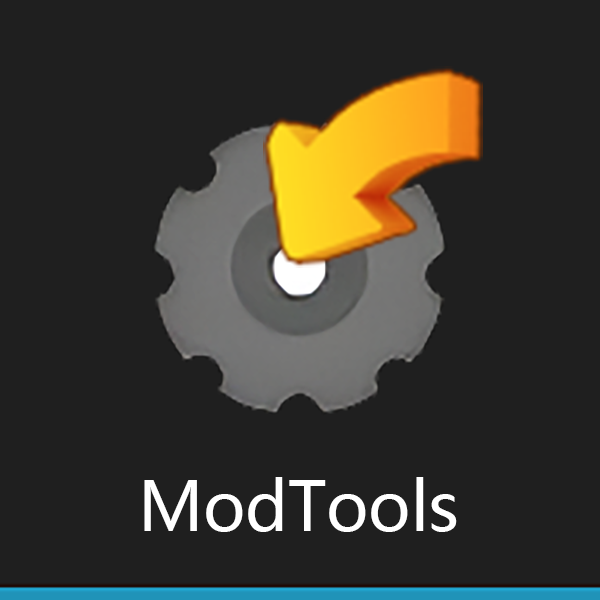
<style>
.page{position:relative;width:600px;height:600px;background:#1f1f1f}
.page>*{position:absolute;margin:0}
.t1{font:66.7px "MicrosoftYaHei";color:#ffffff}
</style>
<div class="page">
<p class="t1" style="left:144px;top:477px;width:313px;height:55px">ModTools</p>
</div>
